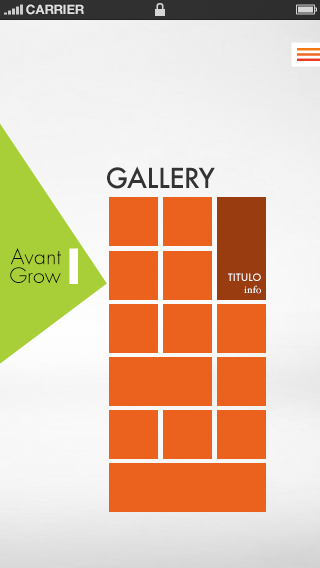
<style>
.page{position:relative;width:320px;height:568px;background:#eb621e}
.page>*{position:absolute;margin:0}
.t1{font:13px "HelveticaNeue-Bold";color:#e0e0e0;text-transform:uppercase}
.t2{font:26.9px "Futura-Medium";letter-spacing:-0.012em;color:#333333}
.t3{font:26.9px "Futura-Medium";letter-spacing:-0.025em;color:#333333}
.t4{font:26.9px "Futura-Medium";letter-spacing:-0.023em;color:#333333}
.t5{font:21px/18.7px "FuturaLight";color:#000000}
.t6{font:10px "Futura-Medium";color:#ffffff}
.t7{font:10px "HoeflerText-Regular";color:#ffffff}
</style>
<div class="page">
<p class="t1" style="left:26px;top:4px;width:58px;height:11px">CARRIER</p>
<p class="t2" style="left:107px;top:166px;width:108px;height:23px">GA<span class="t3">L</span><span class="t4">LE</span>RY</p>
<p class="t5" style="left:10px;top:248px;width:51px;height:36px;text-align:right">Avant<br>Grow</p>
<p class="t6" style="left:228px;top:273px;width:33px;height:8px">TITULO</p>
<p class="t7" style="left:244px;top:285px;width:17px;height:9px">info</p>
</div>
